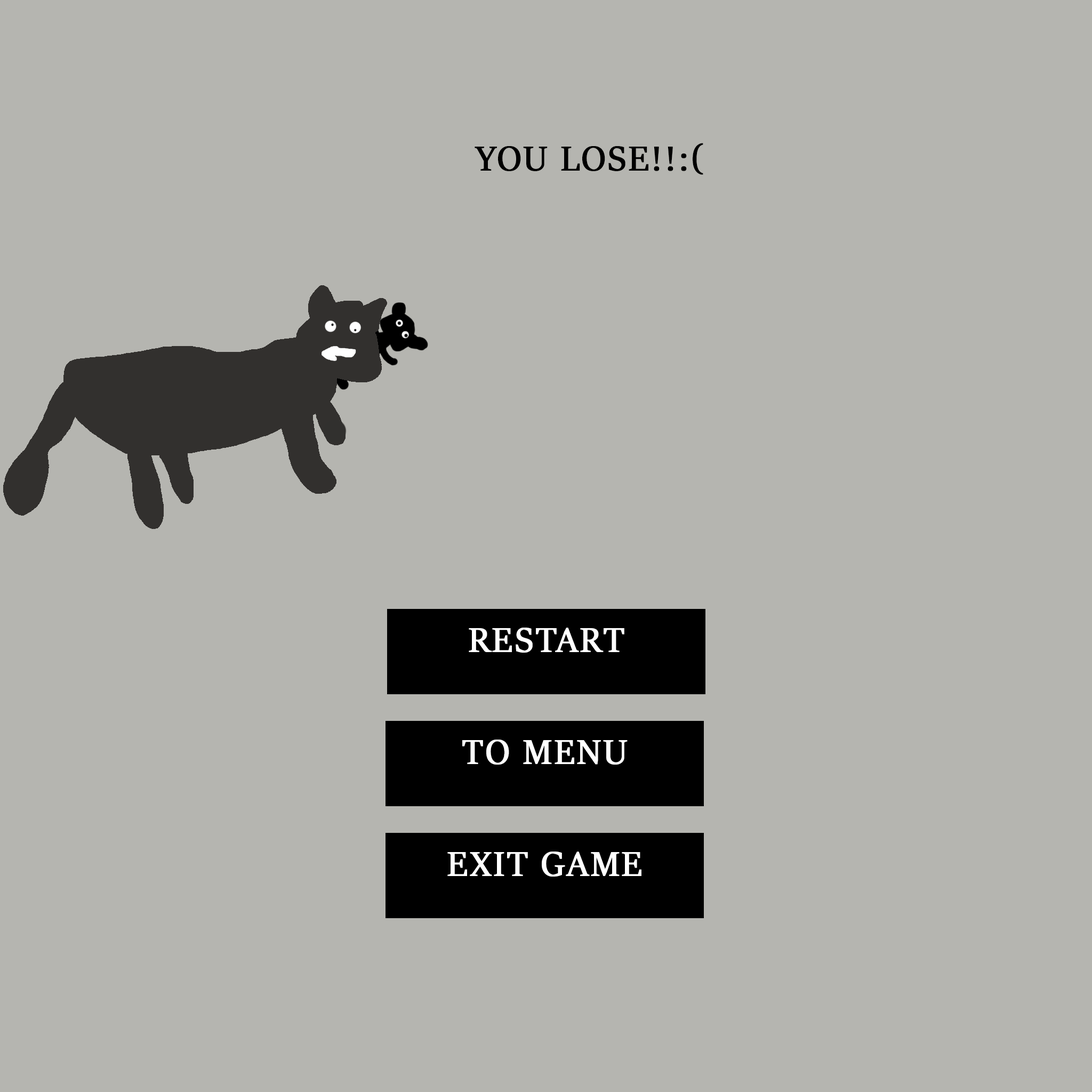
<style>
.page{position:relative;width:1092px;height:1092px;background:#b5b5b0}
.page>*{position:absolute;margin:0}
.t1{font:38.4px "SitkaBanner";letter-spacing:0.04em;color:#000000;text-transform:uppercase;font-weight:bold}
.t2{font:38.4px "SitkaBanner";letter-spacing:0.04em;color:#ffffff;text-transform:uppercase;font-weight:bold}
</style>
<div class="page">
<p class="t1" style="left:475px;top:143px;width:228px;height:32px">you lose!!:(</p>
<p class="t2" style="left:469px;top:628px;width:155px;height:25px">Restart</p>
<p class="t2" style="left:462px;top:740px;width:166px;height:25px">To Menu</p>
<p class="t2" style="left:447px;top:852px;width:194px;height:25px">Exit game</p>
</div>
